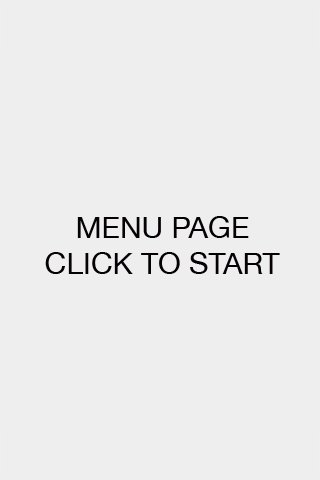
<style>
.page{position:relative;width:320px;height:480px;background:#eeeeee}
.page>*{position:absolute;margin:0}
.t1{font:30px "HelveticaNeue";color:#040004}
</style>
<div class="page">
<p class="t1" style="left:45px;top:216px;width:235px;height:58px;text-align:center">MENU PAGE<br>CLICK TO START</p>
</div>
